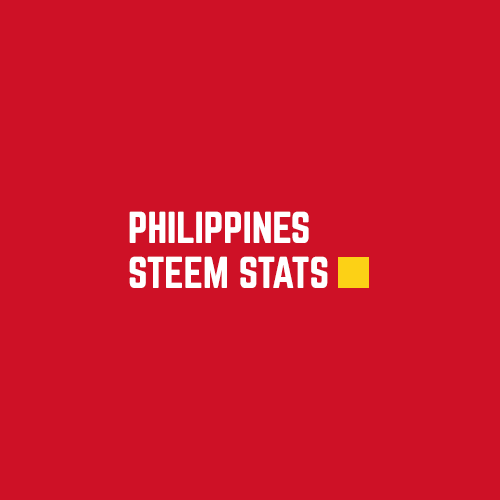
<style>
.page{position:relative;width:500px;height:500px;background:#ce1126}
.page>*{position:absolute;margin:0}
.t1{font:39px "Norwester-Regular";color:#ffffff}
</style>
<div class="page">
<p class="t1" style="left:129px;top:211px;width:180px;height:32px">PHILIPPINES</p>
<p class="t1" style="left:129px;top:211px;width:180px;height:32px">PHILIPPINES</p>
<p class="t1" style="left:129px;top:211px;width:180px;height:32px">PHILIPPINES</p>
<p class="t1" style="left:129px;top:211px;width:180px;height:32px">PHILIPPINES</p>
<p class="t1" style="left:129px;top:211px;width:180px;height:32px">PHILIPPINES</p>
<p class="t1" style="left:129px;top:256px;width:199px;height:32px">STEEM STATS</p>
<p class="t1" style="left:129px;top:256px;width:199px;height:32px">STEEM STATS</p>
<p class="t1" style="left:129px;top:256px;width:199px;height:32px">STEEM STATS</p>
<p class="t1" style="left:129px;top:256px;width:199px;height:32px">STEEM STATS</p>
<p class="t1" style="left:129px;top:256px;width:199px;height:32px">STEEM STATS</p>
</div>
